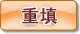
<style>
.page{position:relative;width:80px;height:34px}
.page>*{position:absolute;margin:0}
.t1{font:18px "SimHei";color:#722929;font-weight:bold}
</style>
<div class="page">
<p class="t1" style="left:21px;top:7px;width:36px;height:17px">重填</p>
</div>
